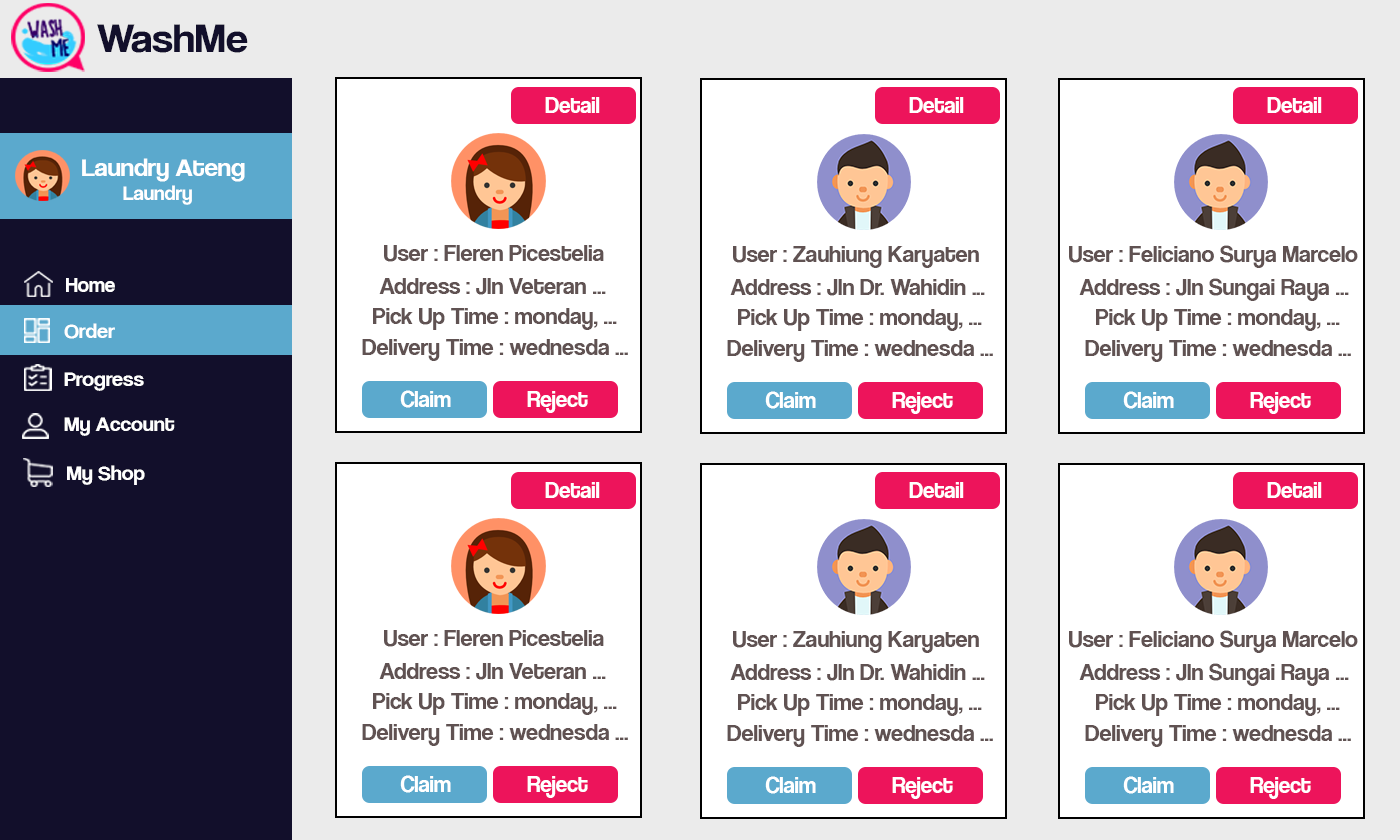
<style>
.page{position:relative;width:1400px;height:840px;background:#ffffff}
.page>*{position:absolute;margin:0}
.t1{font:42.1px "CoolveticaRg-Regular";color:#120f2b;scale:1.05 1}
.t2{font:22.7px "CoolveticaRg-Regular";color:#ffffff}
.t3{font:25.2px "CoolveticaRg-Regular";color:#ffffff;scale:1.05 1}
.t4{font:20px "CoolveticaRg-Regular";color:#ffffff;scale:1.05 1}
.t5{font:24px "CoolveticaRg-Regular";color:#605252}
.t6{font:21px "CoolveticaRg-Regular";color:#ffffff}
.t7{font:21px "CoolveticaRg-Regular";color:#ffffff;scale:1.05 1}
</style>
<div class="page">
<p class="t1" style="left:97px;top:24px;width:151px;height:29px">WashMe</p>
<p class="t2" style="left:545px;top:97px;width:55px;height:16px">Detail</p>
<p class="t2" style="left:909px;top:97px;width:55px;height:16px">Detail</p>
<p class="t2" style="left:1267px;top:97px;width:55px;height:16px">Detail</p>
<p class="t3" style="left:82px;top:158px;width:163px;height:47px">Laundry Ateng<br><span class="t4">        Laundry</span></p>
<p class="t5" style="left:384px;top:245px;width:220px;height:17px">User : Fleren Picestelia</p>
<p class="t5" style="left:733px;top:246px;width:246px;height:22px">User : Zauhiung Karyaten</p>
<p class="t5" style="left:1069px;top:245px;width:289px;height:23px">User : Feliciano Surya Marcelo</p>
<p class="t6" style="left:66px;top:278px;width:49px;height:14px">Home</p>
<p class="t5" style="left:379px;top:278px;width:227px;height:17px">Address : Jln Veteran ...</p>
<p class="t5" style="left:730px;top:279px;width:255px;height:17px">Address : Jln Dr. Wahidin ...</p>
<p class="t5" style="left:1079px;top:278px;width:270px;height:23px">Address : Jln Sungai Raya ...</p>
<p class="t5" style="left:373px;top:308px;width:244px;height:22px">Pick Up Time : monday, ...</p>
<p class="t5" style="left:738px;top:309px;width:244px;height:22px">Pick Up Time : monday, ...</p>
<p class="t5" style="left:1096px;top:309px;width:244px;height:22px">Pick Up Time : monday, ...</p>
<p class="t7" style="left:64px;top:323px;width:51px;height:16px">Order</p>
<p class="t5" style="left:362px;top:339px;width:266px;height:22px">Delivery Time : wednesda ...</p>
<p class="t5" style="left:727px;top:340px;width:266px;height:22px">Delivery Time : wednesda ...</p>
<p class="t5" style="left:1085px;top:340px;width:266px;height:22px">Delivery Time : wednesda ...</p>
<p class="t7" style="left:64px;top:372px;width:80px;height:19px">Progress</p>
<p class="t2" style="left:400px;top:390px;width:51px;height:18px">Claim</p>
<p class="t2" style="left:527px;top:391px;width:61px;height:22px">Reject</p>
<p class="t2" style="left:765px;top:391px;width:51px;height:18px">Claim</p>
<p class="t2" style="left:892px;top:392px;width:61px;height:22px">Reject</p>
<p class="t2" style="left:1123px;top:391px;width:51px;height:18px">Claim</p>
<p class="t2" style="left:1250px;top:392px;width:61px;height:22px">Reject</p>
<p class="t7" style="left:64px;top:417px;width:111px;height:19px">My Account</p>
<p class="t7" style="left:67px;top:465px;width:78px;height:20px">My Shop</p>
<p class="t2" style="left:545px;top:482px;width:55px;height:16px">Detail</p>
<p class="t2" style="left:909px;top:482px;width:55px;height:16px">Detail</p>
<p class="t2" style="left:1267px;top:482px;width:55px;height:16px">Detail</p>
<p class="t5" style="left:384px;top:630px;width:220px;height:17px">User : Fleren Picestelia</p>
<p class="t5" style="left:1069px;top:630px;width:289px;height:23px">User : Feliciano Surya Marcelo</p>
<p class="t5" style="left:733px;top:631px;width:246px;height:22px">User : Zauhiung Karyaten</p>
<p class="t5" style="left:379px;top:663px;width:227px;height:17px">Address : Jln Veteran ...</p>
<p class="t5" style="left:730px;top:664px;width:255px;height:17px">Address : Jln Dr. Wahidin ...</p>
<p class="t5" style="left:1079px;top:663px;width:270px;height:23px">Address : Jln Sungai Raya ...</p>
<p class="t5" style="left:373px;top:693px;width:244px;height:22px">Pick Up Time : monday, ...</p>
<p class="t5" style="left:738px;top:694px;width:244px;height:22px">Pick Up Time : monday, ...</p>
<p class="t5" style="left:1096px;top:694px;width:244px;height:22px">Pick Up Time : monday, ...</p>
<p class="t5" style="left:362px;top:724px;width:266px;height:22px">Delivery Time : wednesda ...</p>
<p class="t5" style="left:727px;top:725px;width:266px;height:22px">Delivery Time : wednesda ...</p>
<p class="t5" style="left:1085px;top:725px;width:266px;height:22px">Delivery Time : wednesda ...</p>
<p class="t2" style="left:400px;top:775px;width:51px;height:18px">Claim</p>
<p class="t2" style="left:527px;top:776px;width:61px;height:22px">Reject</p>
<p class="t2" style="left:765px;top:776px;width:51px;height:18px">Claim</p>
<p class="t2" style="left:892px;top:777px;width:61px;height:22px">Reject</p>
<p class="t2" style="left:1123px;top:776px;width:51px;height:18px">Claim</p>
<p class="t2" style="left:1250px;top:777px;width:61px;height:22px">Reject</p>
</div>
